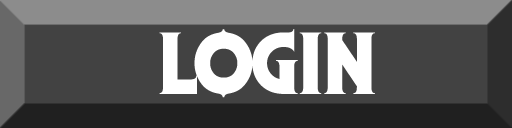
<style>
.page{position:relative;width:512px;height:128px;background:#424242}
.page>*{position:absolute;margin:0}
.t1{font:72.8px "EvilDead";color:#ffffff}
</style>
<div class="page">
<p class="t1" style="left:159px;top:29px;width:216px;height:69px">Login</p>
</div>
